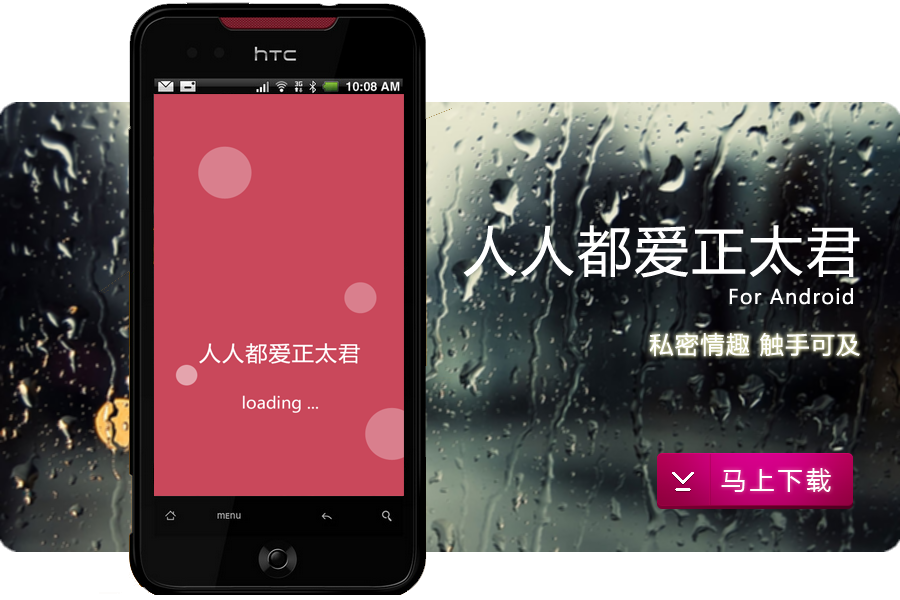
<style>
.page{position:relative;width:900px;height:600px}
.page>*{position:absolute;margin:0}
.t1{font:54px "MicrosoftYaHei";letter-spacing:0.06em;color:#ffffff}
.t2{font:20px "MicrosoftYaHei";letter-spacing:0.06em;color:#ffffff}
.t3{font:24px "MicrosoftYaHei";letter-spacing:0.06em;color:#ffffff}
.t4{font:25px "MicrosoftYaHei";letter-spacing:0.13em;color:#ffffff}
</style>
<div class="page">
<p class="t1" style="left:463px;top:225px;width:397px;height:53px">人人都爱正太君</p>
<p class="t2" style="left:729px;top:288px;width:124px;height:17px">For Android</p>
<p class="t3" style="left:649px;top:332px;width:211px;height:25px">私密情趣 触手可及</p>
<p class="t4" style="left:721px;top:468px;width:110px;height:24px">马上下载</p>
</div>
